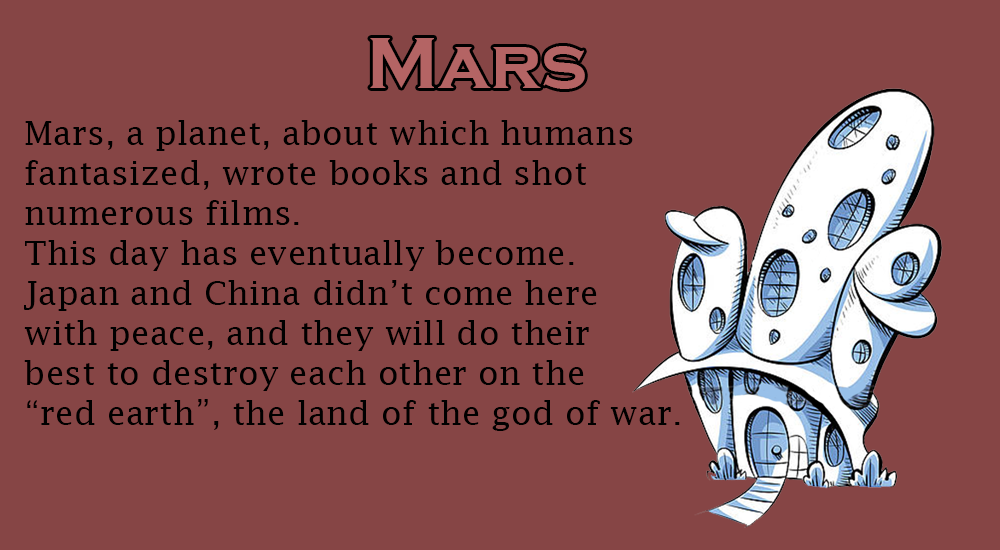
<style>
.page{position:relative;width:1000px;height:550px;background:#864545}
.page>*{position:absolute;margin:0}
.t1{font:75px "CopperplateGothic-Bold";color:#b46464}
.t2{font:33.3px "LucidaFax";color:#000000}
</style>
<div class="page">
<p class="t1" style="left:370px;top:38px;width:215px;height:51px">Mars</p>
<p class="t2" style="left:24px;top:120px;width:656px;height:311px">Mars, a planet, about which humans <br>fantasized, wrote books and shot <br>numerous films.<br>This day has eventually become.<br>Japan and China didn’t come here<br>with peace, and they will do their<br>best to destroy each other on the <br>“red earth”, the land of the god of war.</p>
</div>
